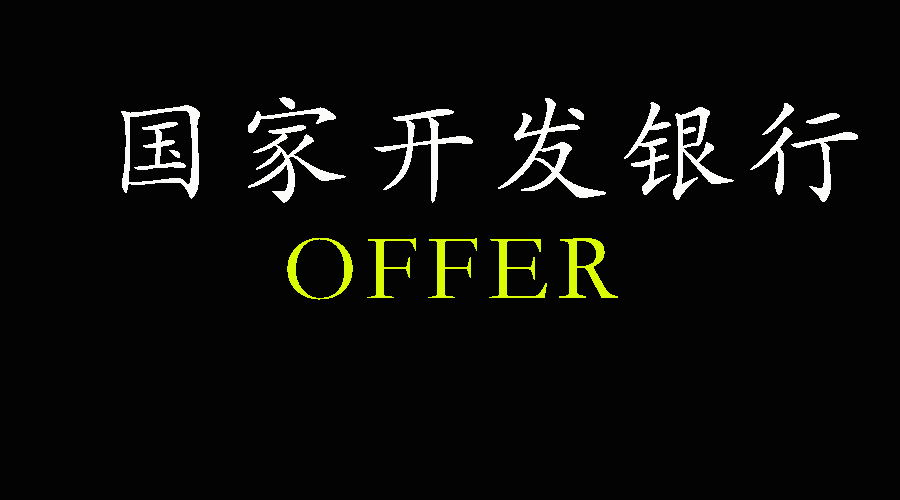
<style>
.page{position:relative;width:900px;height:500px;background:#030303}
.page>*{position:absolute;margin:0}
.t1{font:119px "STKaiti";letter-spacing:0.08em;color:#fbfbf9}
.t2{font:95px "STKaiti";letter-spacing:0.08em;color:#dafa06}
</style>
<div class="page">
<p class="t1" style="left:121px;top:97px;width:737px;height:106px">国家开发银行</p>
<p class="t2" style="left:287px;top:238px;width:331px;height:62px">OFFER</p>
</div>
